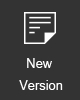
<style>
.page{position:relative;width:80px;height:100px;background:#333333}
.page>*{position:absolute;margin:0}
.t1{font:18px "Utsaah";color:#ffffff}
</style>
<div class="page">
<p class="t1" style="left:19px;top:58px;width:44px;height:32px;text-align:center">New <br>Version</p>
</div>
